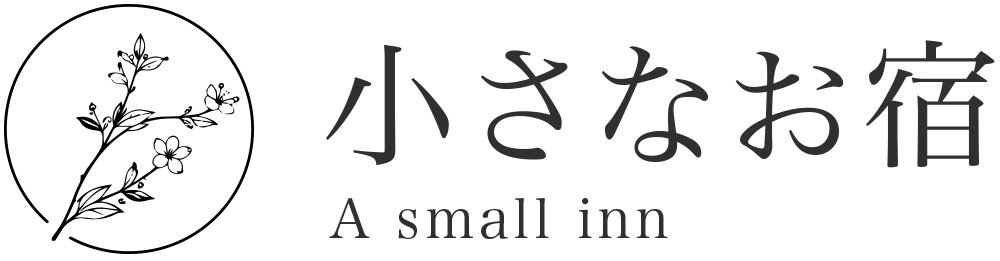
<style>
.page{position:relative;width:1000px;height:261px;background:#ffffff}
.page>*{position:absolute;margin:0}
.t1{font:137.2px "HiraMinPro-W3";letter-spacing:0.075em;color:#303030}
.t2{font:55.2px "HiraMinPro-W3";letter-spacing:0.075em;color:#303030}
</style>
<div class="page">
<p class="t1" style="left:326px;top:40px;width:669px;height:128px">小さなお宿</p>
<p class="t2" style="left:329px;top:198px;width:339px;height:41px">A small inn</p>
</div>
